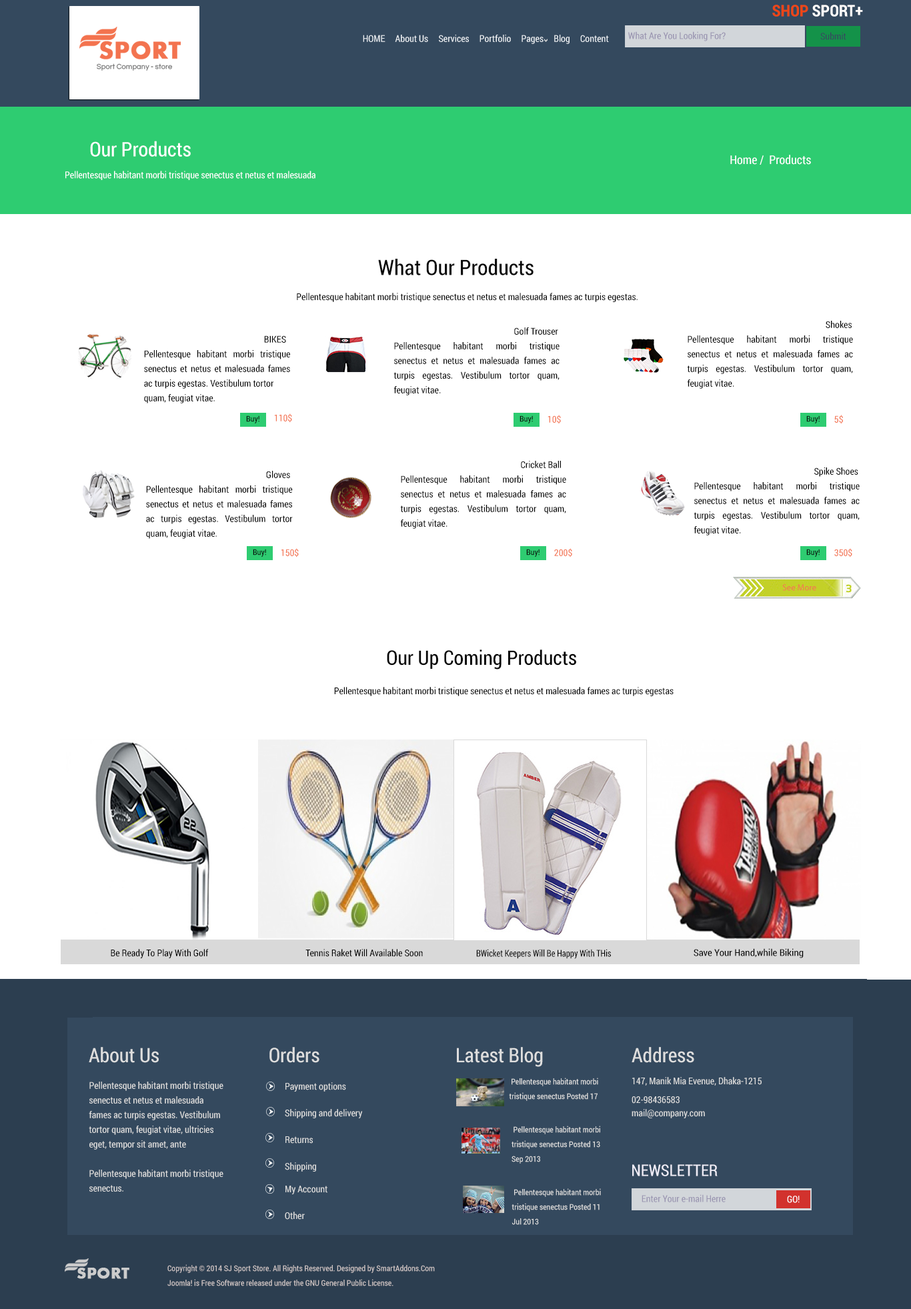
<style>
.page{position:relative;width:911px;height:1309px;background:#ffffff}
.page>*{position:absolute;margin:0}
.t1{font:16px "RobotoCondensed-Bold";color:#fffdfc}
.t2{font:16px "RobotoCondensed-Bold";color:#ee4616}
.t3{font:9.3px "RobotoCondensed-Regular";color:#edf1f5}
.t4{font:9.3px "RobotoCondensed-Regular";color:#9a95b1}
.t5{font:9.3px "RobotoCondensed-Regular";color:#34495e}
.t6{font:20px "RobotoCondensed-Regular";color:#ffffff}
.t7{font:12px "RobotoCondensed-Regular";color:#ffffff}
.t8{font:9.3px "RobotoCondensed-Regular";color:#ffffff}
.t9{font:21.3px "RobotoCondensed-Regular";color:#070707}
.t10{font:9.3px "RobotoCondensed-Regular";color:#070707}
.t11{font:9.3px/14.7px "RobotoCondensed-Regular";color:#070707}
.t12{font:9.3px "RobotoCondensed-Regular";color:#f3734f}
.t13{font:8px "RobotoCondensed-Regular";color:#080808}
.t14{font:8.9px "MyriadPro-Regular";color:#f3734f}
.t15{font:9.3px/14.7px "RobotoCondensed-Regular";color:#030303}
.t16{font:20px/14.7px "RobotoCondensed-Regular";color:#030303}
.t17{font:9.3px "RobotoCondensed-Regular";color:#030303}
.t18{font:9.3px "RobotoCondensed-Regular";color:#030303;scale:0.9 1}
.t19{font:9.3px "RobotoCondensed-Regular";color:#030303;scale:1.07 1}
.t20{font:20px "RobotoCondensed-Regular";color:#dedede}
.t21{font:9.3px/14.7px "RobotoCondensed-Regular";color:#dedede}
.t22{font:9.3px "RobotoCondensed-Regular";color:#dedede}
.t23{font:8px/14.7px "RobotoCondensed-Regular";color:#dedede}
.t24{font:16px "RobotoCondensed-Regular";color:#efedf7}
.t25{font:8px/14.7px "RobotoCondensed-Regular";color:#d0c6c6}
</style>
<div class="page">
<p class="t1" style="left:772px;top:5px;width:91px;height:12px"><span class="t2">SHOP </span>SPORT+</p>
<p class="t3" style="left:363px;top:35px;width:246px;height:9px">HOME     About Us     Services     Portfolio     Pages     Blog     Content</p>
<p class="t4" style="left:628px;top:31px;width:98px;height:10px">What Are You Looking For?</p>
<p class="t5" style="left:820px;top:32px;width:26px;height:8px">Submit</p>
<p class="t6" style="left:90px;top:141px;width:101px;height:16px">Our Products</p>
<p class="t7" style="left:730px;top:155px;width:81px;height:10px">Home /  Products</p>
<p class="t8" style="left:65px;top:171px;width:250px;height:9px">Pellentesque habitant morbi tristique senectus et netus et malesuada</p>
<p class="t9" style="left:378px;top:259px;width:155px;height:16px">What Our Products</p>
<p class="t10" style="left:297px;top:293px;width:341px;height:9px">Pellentesque habitant morbi tristique senectus et netus et malesuada fames ac turpis egestas.</p>
<p class="t11" style="left:393px;top:327px;width:166px;height:68px;text-align:justify">Golf Trouser<br>Pellentesque habitant morbi tristique senectus et netus et malesuada fames ac turpis egestas. Vestibulum tortor quam, feugiat vitae.</p>
<p class="t11" style="left:687px;top:321px;width:166px;height:68px;text-align:justify">Shokes<br>Pellentesque habitant morbi tristique senectus et netus et malesuada fames ac turpis egestas. Vestibulum tortor quam, feugiat vitae.</p>
<p class="t11" style="left:144px;top:335px;width:146px;height:68px;text-align:justify">BIKES<br>Pellentesque habitant morbi tristique senectus et netus et malesuada fames ac turpis egestas. Vestibulum tortor <br>quam, feugiat vitae.</p>
<p class="t12" style="left:274px;top:413px;width:18px;height:10px">110$</p>
<p class="t13" style="left:246px;top:415px;width:13px;height:8px">Buy!</p>
<p class="t13" style="left:519px;top:415px;width:14px;height:8px">Buy!</p>
<p class="t12" style="left:547px;top:415px;width:14px;height:9px">10$</p>
<p class="t13" style="left:806px;top:415px;width:14px;height:8px">Buy!</p>
<p class="t12" style="left:834px;top:415px;width:9px;height:9px">5$</p>
<p class="t11" style="left:400px;top:461px;width:166px;height:68px;text-align:justify">Cricket Ball<br>Pellentesque habitant morbi tristique senectus et netus et malesuada fames ac turpis egestas. Vestibulum tortor quam, feugiat vitae.</p>
<p class="t11" style="left:146px;top:471px;width:147px;height:68px;text-align:justify">Gloves<br>Pellentesque habitant morbi tristique senectus et netus et malesuada fames ac turpis egestas. Vestibulum tortor quam, feugiat vitae.</p>
<p class="t11" style="left:694px;top:467px;width:166px;height:68px;text-align:justify">Spike Shoes<br>Pellentesque habitant morbi tristique senectus et netus et malesuada fames ac turpis egestas. Vestibulum tortor quam, feugiat vitae.</p>
<p class="t13" style="left:253px;top:549px;width:13px;height:8px">Buy!</p>
<p class="t12" style="left:281px;top:548px;width:18px;height:9px">150$</p>
<p class="t13" style="left:526px;top:549px;width:13px;height:8px">Buy!</p>
<p class="t12" style="left:554px;top:548px;width:18px;height:9px">200$</p>
<p class="t13" style="left:806px;top:549px;width:14px;height:8px">Buy!</p>
<p class="t12" style="left:834px;top:548px;width:18px;height:9px">350$</p>
<p class="t14" style="left:782px;top:584px;width:34px;height:7px">See More</p>
<p class="t15" style="left:334px;top:650px;width:340px;height:46px"><span class="t16">            Our Up Coming Products<br>       <br></span>Pellentesque habitant morbi tristique senectus et netus et malesuada fames ac turpis egestas</p>
<p class="t17" style="left:111px;top:949px;width:98px;height:9px">Be Ready To Play With Golf</p>
<p class="t17" style="left:305px;top:949px;width:118px;height:8px">Tennis Raket Will Available Soon</p>
<p class="t18" style="left:476px;top:949px;width:135px;height:10px">BWicket Keepers Will Be Happy With THis</p>
<p class="t19" style="left:694px;top:948px;width:110px;height:10px">Save Your Hand,while Biking</p>
<p class="t20" style="left:89px;top:1047px;width:70px;height:16px">About Us</p>
<p class="t20" style="left:269px;top:1047px;width:50px;height:16px">Orders</p>
<p class="t20" style="left:457px;top:1047px;width:86px;height:20px">Latest Blog</p>
<p class="t20" style="left:632px;top:1047px;width:62px;height:16px">Address</p>
<p class="t21" style="left:89px;top:1082px;width:134px;height:110px">Pellentesque habitant morbi tristique senectus et netus et malesuada fames ac turpis egestas. Vestibulum tortor quam, feugiat vitae, ultricies eget, tempor sit amet, ante<br><br>Pellentesque habitant morbi tristique senectus.</p>
<p class="t22" style="left:285px;top:1082px;width:61px;height:10px">Payment options</p>
<p class="t23" style="left:509px;top:1078px;width:89px;height:23px">Pellentesque habitant morbi tristique senectus Posted 17 Aug 2013</p>
<p class="t22" style="left:632px;top:1077px;width:130px;height:9px">147, Manik Mia Evenue, Dhaka-1215</p>
<p class="t22" style="left:632px;top:1096px;width:48px;height:8px">02-98436583</p>
<p class="t22" style="left:285px;top:1109px;width:78px;height:9px">Shipping and delivery</p>
<p class="t22" style="left:632px;top:1109px;width:73px;height:9px">mail@company.com</p>
<p class="t23" style="left:511px;top:1126px;width:89px;height:38px">Pellentesque habitant morbi tristique senectus Posted 13 Sep 2013</p>
<p class="t22" style="left:285px;top:1136px;width:28px;height:8px">Returns</p>
<p class="t22" style="left:285px;top:1162px;width:31px;height:10px">Shipping</p>
<p class="t24" style="left:632px;top:1164px;width:86px;height:12px">NEWSLETTER</p>
<p class="t22" style="left:285px;top:1186px;width:42px;height:8px">My Account</p>
<p class="t23" style="left:511px;top:1188px;width:90px;height:37px">Pellentesque habitant morbi tristique senectus Posted 11 Jul 2013</p>
<p class="t4" style="left:642px;top:1194px;width:84px;height:8px">Enter Your e-mail Herre</p>
<p class="t8" style="left:787px;top:1196px;width:13px;height:7px">GO!</p>
<p class="t22" style="left:285px;top:1212px;width:20px;height:8px">Other</p>
<p class="t25" style="left:167px;top:1264px;width:268px;height:22px">Copyright © 2014 SJ Sport Store. All Rights Reserved. Designed by SmartAddons.Com<br>Joomla! is Free Software released under the GNU General Public License.</p>
</div>
